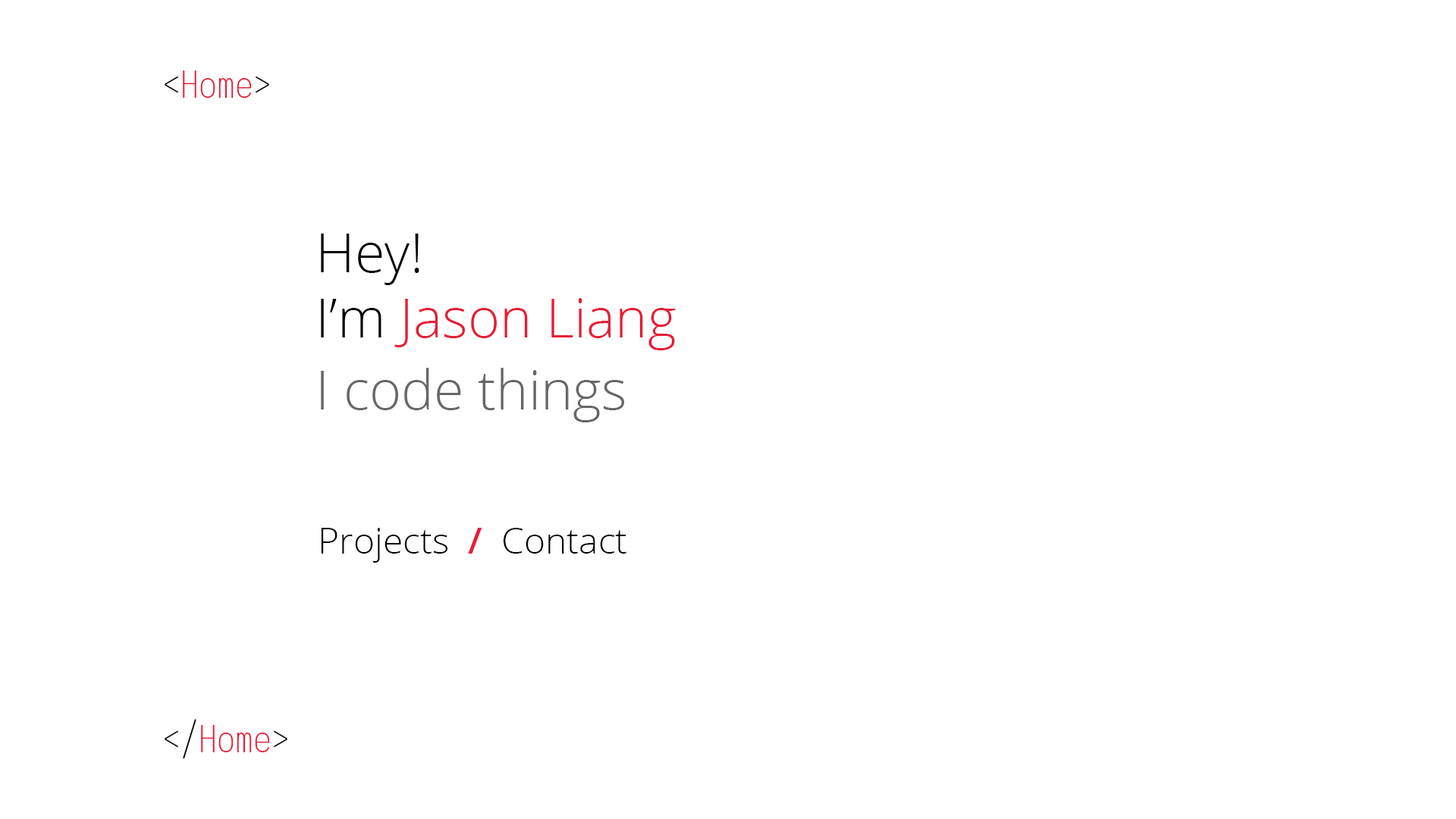
<style>
.page{position:relative;width:1456px;height:819px;background:#ffffff}
.page>*{position:absolute;margin:0}
.t1{font:36.4px "IosevkaNerdFontComplete-Extralight";color:#000000}
.t2{font:36.4px "IosevkaNerdFontComplete-Extralight";color:#e71d36}
.t3{font:54.6px "OpenSans-Light";color:#e71d36}
.t4{font:54.6px "OpenSans-Light";color:#000000}
.t5{font:54.6px "OpenSans-Light";color:#676767}
.t6{font:36.4px "OpenSans-Light";color:#000000}
.t7{font:36.4px "OpenSans-SemiBold";color:#e71d36}
</style>
<div class="page">
<p class="t1" style="left:165px;top:71px;width:122px;height:687px">&lt;<span class="t2">Home</span>&gt;<br><br><br><br><br><br><br><br><br><br><br><br><br><br> <br>&lt;/<span class="t2">Home</span>&gt;</p>
<p class="t3" style="left:321px;top:234px;width:355px;height:116px"><span class="t4">Hey!<br>I’m </span>Jason Liang</p>
<p class="t5" style="left:321px;top:368px;width:304px;height:54px">I code things</p>
<p class="t6" style="left:321px;top:528px;width:305px;height:35px">Projects  <span class="t7">/</span>  Contact</p>
</div>
